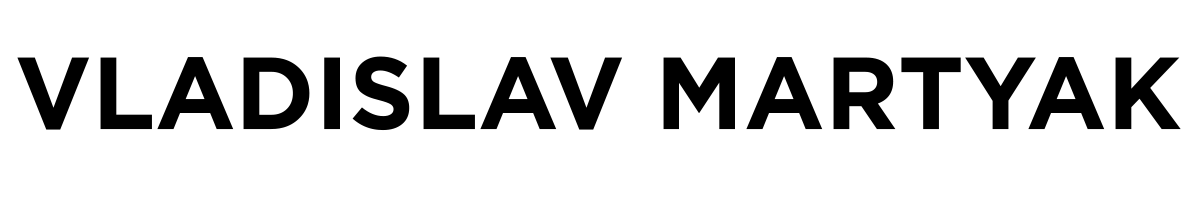
<style>
.page{position:relative;width:1200px;height:200px;background:#ffffff}
.page>*{position:absolute;margin:0}
.t1{font:102px "GothamPro-Bold";color:#000000}
</style>
<div class="page">
<p class="t1" style="left:17px;top:56px;width:1164px;height:75px">VLADISLAV MARTYAK</p>
</div>
